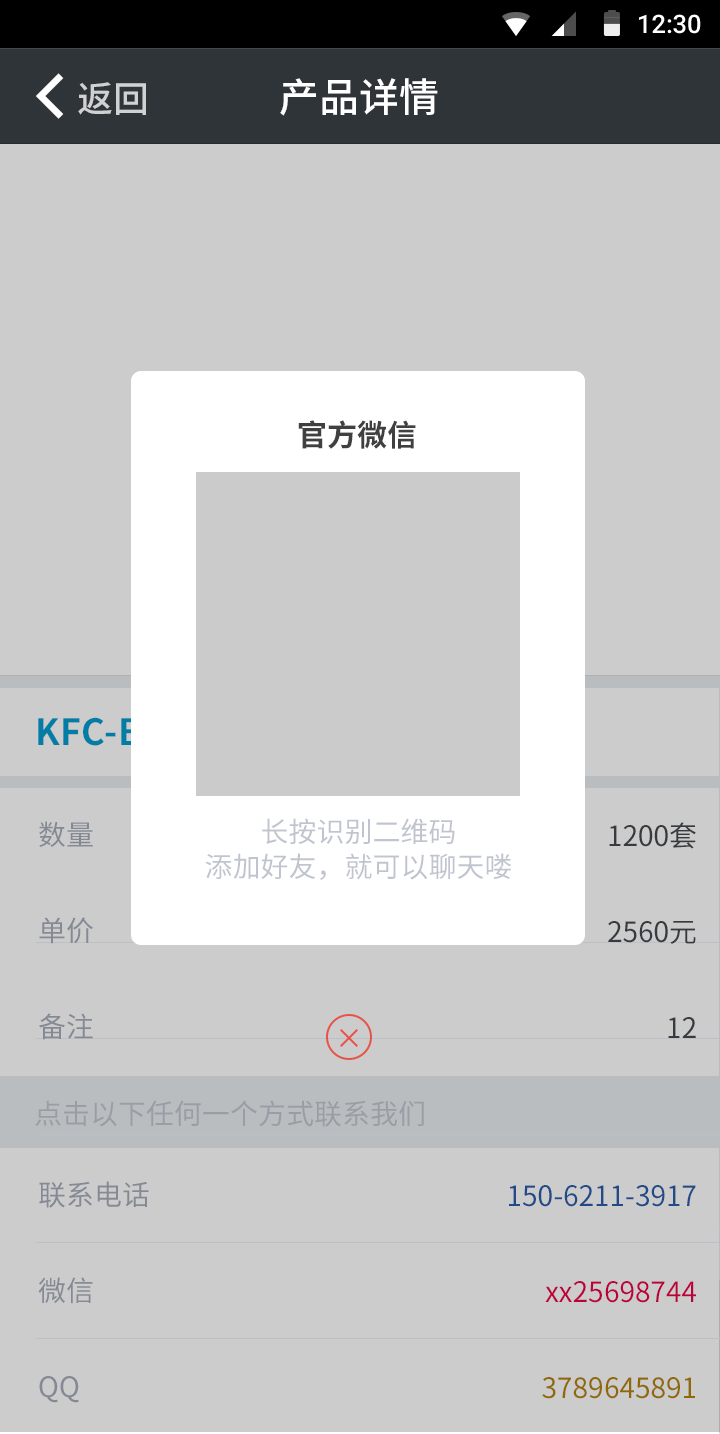
<style>
.page{position:relative;width:720px;height:1434px;background:#cccccc}
.page>*{position:absolute;margin:0}
.t1{font:25.4px "Roboto-Medium";color:#ffffff}
.t2{font:40px "SourceHanSansCN-Medium";color:#ffffff}
.t3{font:36px "SourceHanSansCN-Medium";color:#d0d1d1}
.t4{font:30px "SourceHanSansCN-Bold";color:#404041}
.t5{font:36px "SourceHanSansCN-Bold"}
.t6{font:28px/96px "SourceHanSansCN-Regular";color:#848993}
.t7{font:28px/35px "SourceHanSansCN-Regular";color:#c0c4cf}
.t8{font:28px/96px "SourceHanSansCN-Regular";color:#45484d}
.t9{font:28px "SourceHanSansCN-Regular";color:#9a9da6}
.t10{font:28px/96px "SourceHanSansCN-Regular"}
</style>
<div class="page">
<p class="t1" style="left:639px;top:14px;width:62px;height:20px">12:30</p>
<p class="t2" style="left:280px;top:78px;width:158px;height:38px">产品详情</p>
<p class="t3" style="left:78px;top:82px;width:68px;height:33px">返回</p>
<p class="t4" style="left:298px;top:420px;width:118px;height:29px">官方微信</p>
<p class="t5" style="left:38px;top:716px;width:272px;height:36px">KFC-B7003C/P4</p>
<p class="t6" style="left:39px;top:821px;width:54px;height:219px">数量<br>单价<br>备注</p>
<p class="t7" style="left:205px;top:818px;width:306px;height:62px;text-align:center">长按识别二维码<br>添加好友，就可以聊天喽</p>
<p class="t8" style="left:608px;top:822px;width:88px;height:216px;text-align:right">1200套<br>2560元<br>12</p>
<p class="t9" style="left:35px;top:1100px;width:389px;height:27px">点击以下任何一个方式联系我们</p>
<p class="t6" style="left:38px;top:1181px;width:111px;height:222px">联系电话<br>微信<br>QQ</p>
<p class="t10" style="left:509px;top:1185px;width:187px;height:214px;text-align:right">150-6211-3917<br>xx25698744<br>3789645891</p>
</div>
